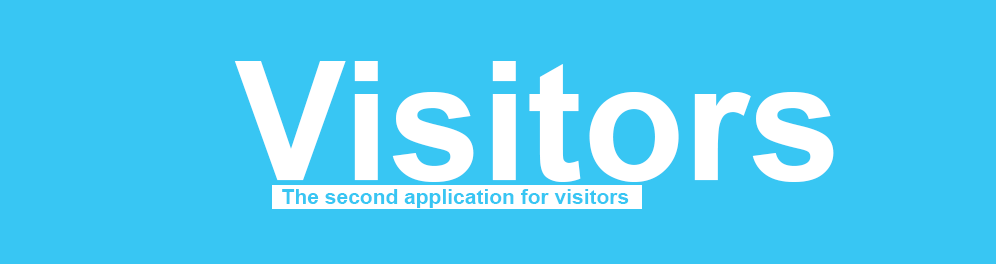
<style>
.page{position:relative;width:996px;height:264px;background:#38c6f3}
.page>*{position:absolute;margin:0}
.t1{font:166px "Arial-BoldMT";color:#ffffff}
.t2{font:21px "Arial-BoldMT";color:#38c6f3}
</style>
<div class="page">
<p class="t1" style="left:234px;top:61px;width:600px;height:121px">Visitors</p>
<p class="t2" style="left:282px;top:189px;width:347px;height:19px">The second application for visitors</p>
</div>
